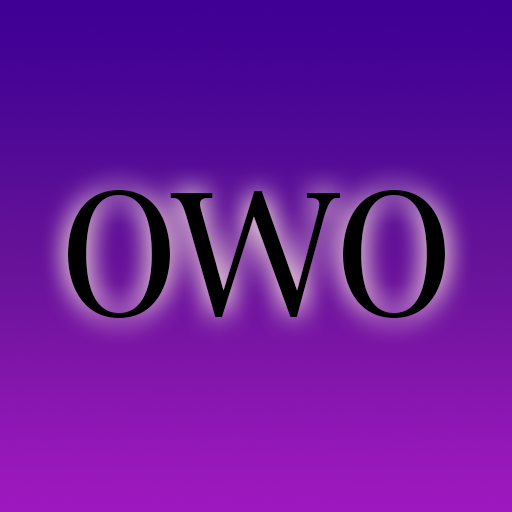
<style>
.page{position:relative;width:512px;height:512px}
.page>*{position:absolute;margin:0}
.t1{font:172px "CentennialLTStd-Light";color:#000000}
</style>
<div class="page">
<p class="t1" style="left:68px;top:190px;width:377px;height:128px">OWO</p>
</div>
